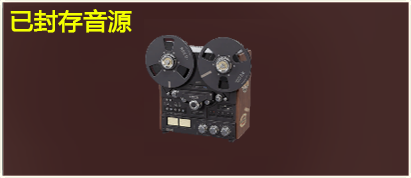
<style>
.page{position:relative;width:411px;height:178px}
.page>*{position:absolute;margin:0}
.t1{font:24px "MicrosoftYaHeiUI";color:#f4ff00;font-weight:bold}
</style>
<div class="page">
<p class="t1" style="left:10px;top:9px;width:122px;height:24px">已封存音源</p>
</div>
